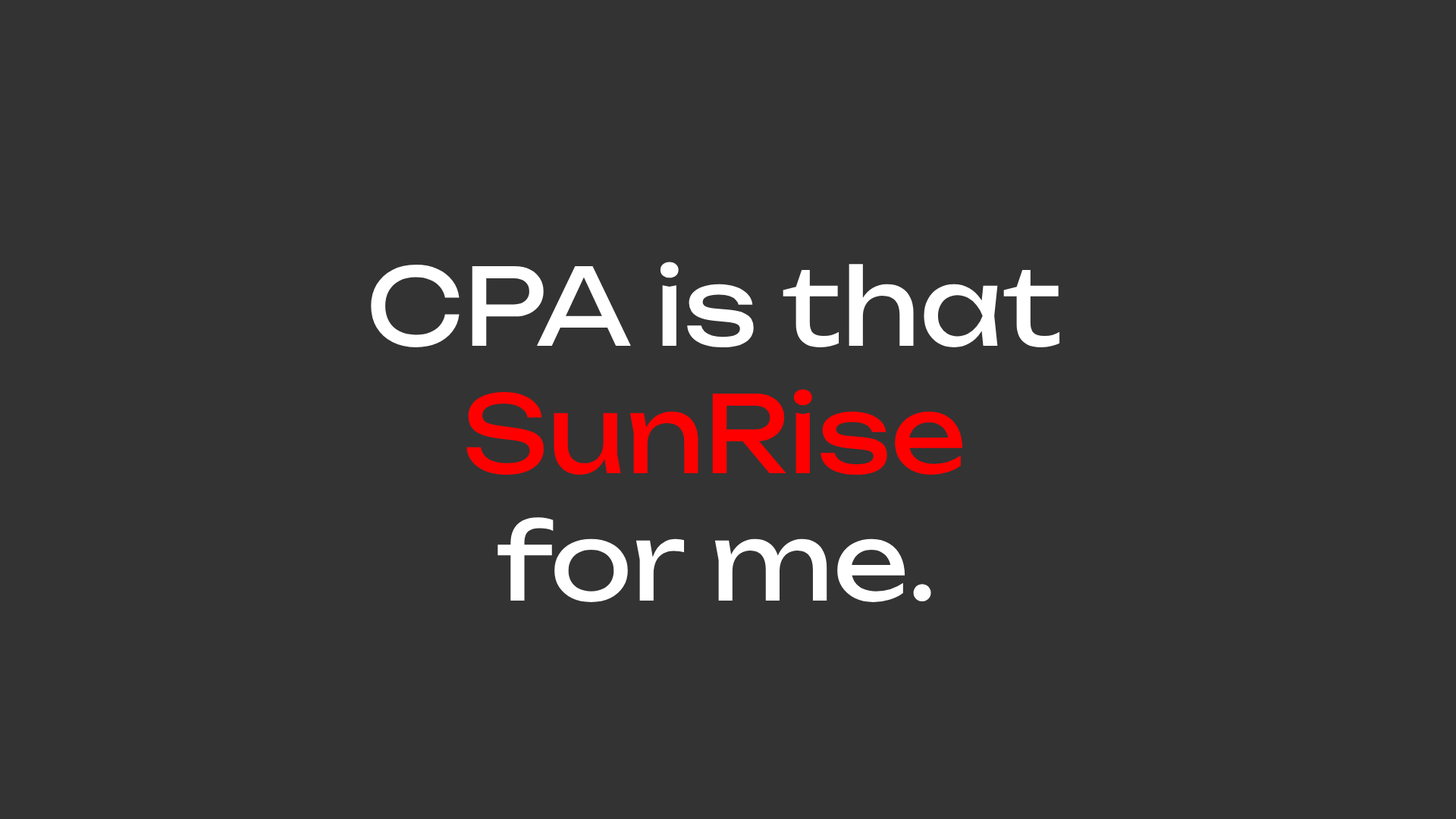
<style>
.page{position:relative;width:1456px;height:819px;background:#333333}
.page>*{position:absolute;margin:0}
.t1{font:106.2px "Unbounded-Regular";color:#ffffff}
.t2{font:106.2px "Unbounded-Regular";color:#ff0000}
</style>
<div class="page">
<p class="t1" style="left:371px;top:262px;width:689px;height:340px;text-align:center">CPA is that <br><span class="t2">SunRise <br></span>for me.</p>
</div>
